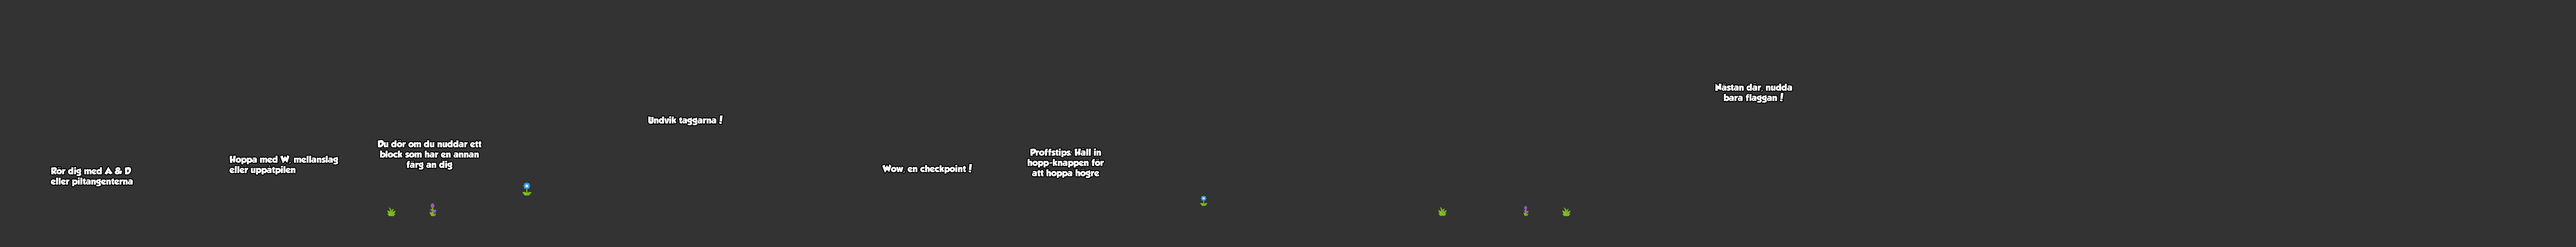
<style>
.page{position:relative;width:2576px;height:247px;background:#333333}
.page>*{position:absolute;margin:0}
.t1{font:8.6px "GROBOLD";color:#ffffff}
.t2{font:8.6px "MyriadPro-Regular";color:#ffffff}
</style>
<div class="page">
<p class="t1" style="left:1715px;top:83px;width:77px;height:20px;text-align:center">Nastan dar, nudda<br>bara flaggan!</p>
<p class="t2" style="left:1723px;top:84px;width:3px;height:1px">¨</p>
<p class="t2" style="left:1754px;top:83px;width:2px;height:1px">¨</p>
<p class="t1" style="left:648px;top:116px;width:75px;height:10px">Undvik taggarna!</p>
<p class="t1" style="left:378px;top:140px;width:104px;height:30px;text-align:center">Du dor om du nuddar ett block som har en annan farg an dig</p>
<p class="t2" style="left:398px;top:140px;width:3px;height:1px">¨</p>
<p class="t1" style="left:1028px;top:148px;width:76px;height:30px;text-align:center">Proffstips: Hall in hopp-knappen for att hoppa hogre</p>
<p class="t1" style="left:1083px;top:148px;width:1px;height:1px">.</p>
<p class="t1" style="left:229px;top:155px;width:109px;height:20px">Hoppa med W, mellanslag eller uppatpilen</p>
<p class="t2" style="left:411px;top:161px;width:3px;height:1px">¨</p>
<p class="t2" style="left:1096px;top:159px;width:3px;height:1px">¨</p>
<p class="t2" style="left:1096px;top:159px;width:3px;height:1px">¨</p>
<p class="t1" style="left:51px;top:167px;width:82px;height:20px">Ror dig med A &amp; D <br>eller piltangenterna</p>
<p class="t2" style="left:58px;top:167px;width:3px;height:1px">¨</p>
<p class="t2" style="left:269px;top:166px;width:1px;height:1px">.</p>
<p class="t1" style="left:882px;top:164px;width:90px;height:10px">Wow, en checkpoint!</p>
<p class="t2" style="left:1082px;top:169px;width:2px;height:1px">¨</p>
</div>
